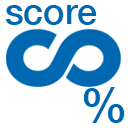
<style>
.page{position:relative;width:128px;height:128px;background:#ffffff}
.page>*{position:absolute;margin:0}
.t1{font:36px "HelveticaNeue-Medium";color:#0068b0}
.t2{font:48px "HelveticaNeue-Medium";color:#0068b0}
</style>
<div class="page">
<p class="t1" style="left:6px;top:5px;width:91px;height:20px">score</p>
<p class="t2" style="left:83px;top:87px;width:41px;height:36px">%</p>
</div>
